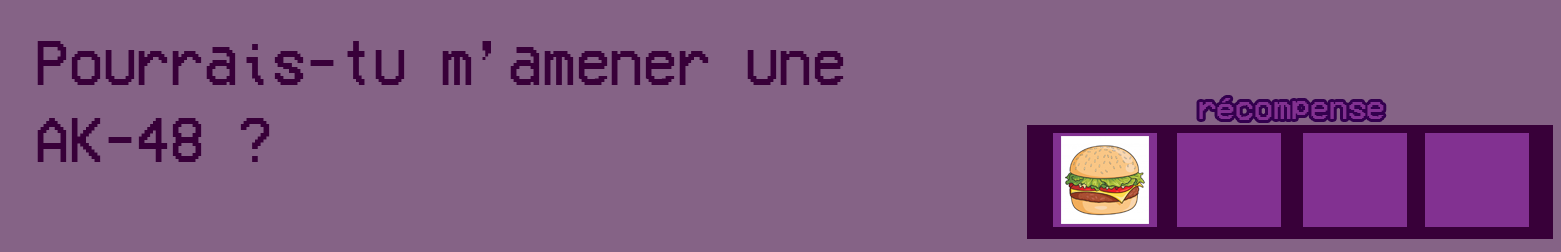
<style>
.page{position:relative;width:1561px;height:252px;background:#856386}
.page>*{position:absolute;margin:0}
.t1{font:64.3px "VCROSDMono";color:#380039;scale:0.9 1}
.t2{font:32px "VCROSDMono";color:#823191}
</style>
<div class="page">
<p class="t1" style="left:37px;top:41px;width:807px;height:121px">Pourrais-tu m’amener une <br>AK-48 ?</p>
<p class="t2" style="left:1199px;top:98px;width:185px;height:22px">récompense</p>
</div>
